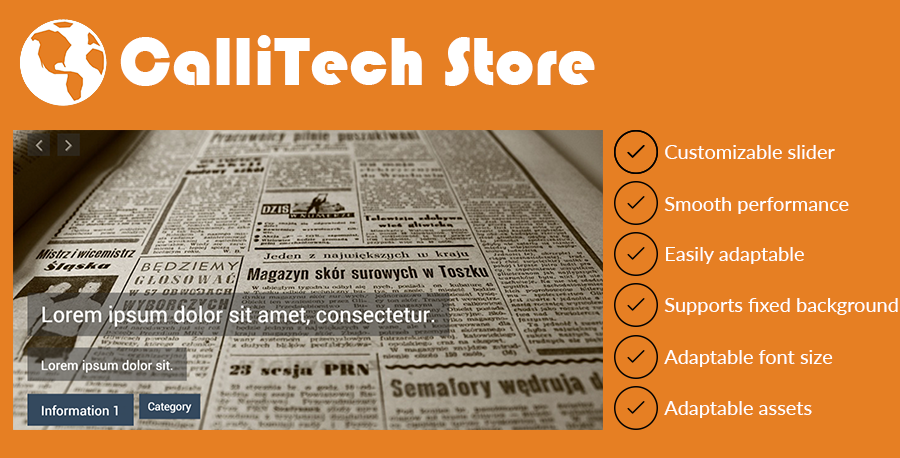
<style>
.page{position:relative;width:900px;height:458px;background:#e67f23}
.page>*{position:absolute;margin:0}
.t1{font:70px "Bauhaus93";color:#ffffff}
.t2{font:20px "Lato-Regular";color:#ffffff}
</style>
<div class="page">
<p class="t1" style="left:120px;top:35px;width:475px;height:51px">CalliTech Store</p>
<p class="t2" style="left:665px;top:145px;width:170px;height:14px">Customizable slider</p>
<p class="t2" style="left:664px;top:197px;width:185px;height:17px">Smooth performance</p>
<p class="t2" style="left:666px;top:247px;width:138px;height:17px">Easily adaptable</p>
<p class="t2" style="left:664px;top:298px;width:234px;height:17px">Supports fixed background</p>
<p class="t2" style="left:664px;top:350px;width:169px;height:17px">Adaptable font size</p>
<p class="t2" style="left:664px;top:401px;width:148px;height:17px">Adaptable assets</p>
</div>
